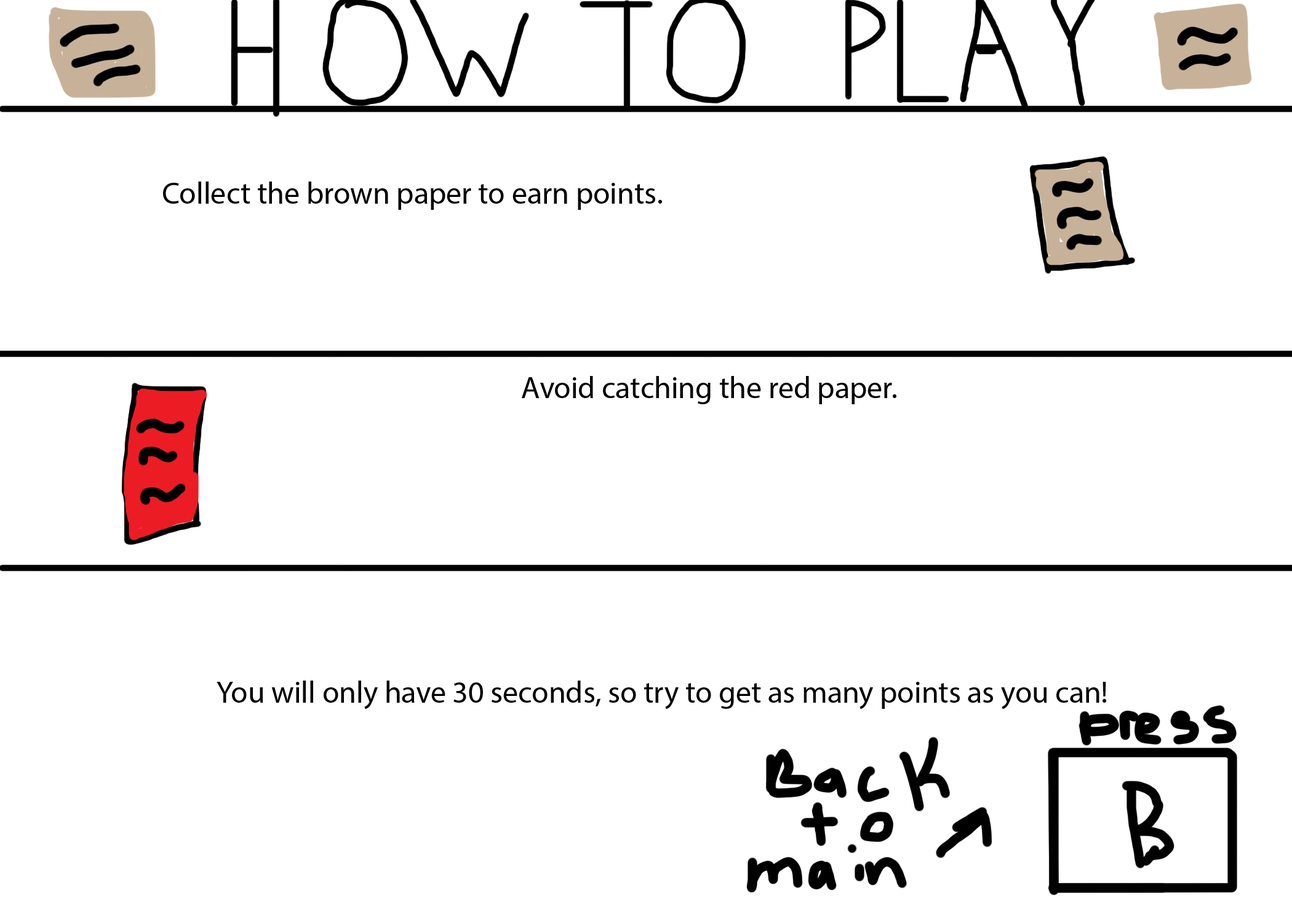
<style>
.page{position:relative;width:1292px;height:923px;background:#ffffff}
.page>*{position:absolute;margin:0}
.t1{font:30.8px "MyriadPro-Regular";color:#000000}
</style>
<div class="page">
<p class="t1" style="left:163px;top:182px;width:499px;height:28px">Collect the brown paper to earn points.</p>
<p class="t1" style="left:522px;top:376px;width:374px;height:28px">Avoid catching the red paper.</p>
<p class="t1" style="left:217px;top:680px;width:889px;height:29px">You will only have 30 seconds, so try to get as many points as you can!</p>
</div>
